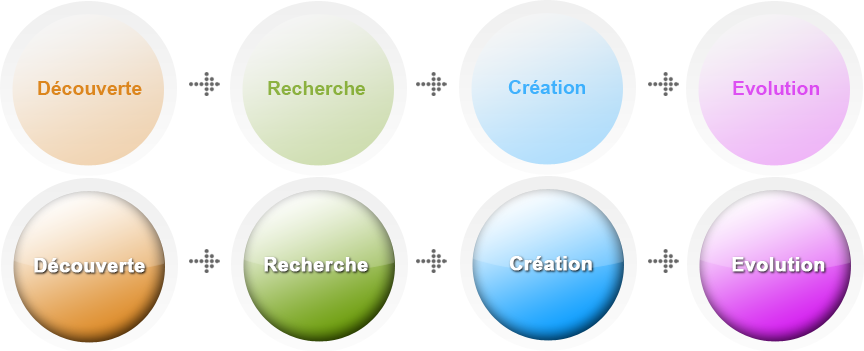
<style>
.page{position:relative;width:864px;height:351px;background:#ffffff}
.page>*{position:absolute;margin:0}
.t1{font:27px "Utsaah-Bold";color:#dc861e}
.t2{font:27px "Utsaah-Bold";color:#8bb13f}
.t3{font:27px "Utsaah-Bold";color:#3fb1fd}
.t4{font:27px "Utsaah-Bold";color:#dc4df2}
.t5{font:27px "Utsaah-Bold";color:#ffffff;font-weight:bold}
</style>
<div class="page">
<p class="t1" style="left:38px;top:81px;width:104px;height:14px">Découverte</p>
<p class="t2" style="left:268px;top:81px;width:97px;height:14px">Recherche</p>
<p class="t3" style="left:508px;top:80px;width:77px;height:14px">Création</p>
<p class="t4" style="left:733px;top:81px;width:86px;height:14px">Evolution</p>
<p class="t5" style="left:264px;top:257px;width:104px;height:15px">Recherche</p>
<p class="t5" style="left:509px;top:256px;width:83px;height:15px">Création</p>
<p class="t5" style="left:732px;top:257px;width:93px;height:15px">Evolution</p>
<p class="t5" style="left:34px;top:258px;width:111px;height:15px">Découverte</p>
</div>
